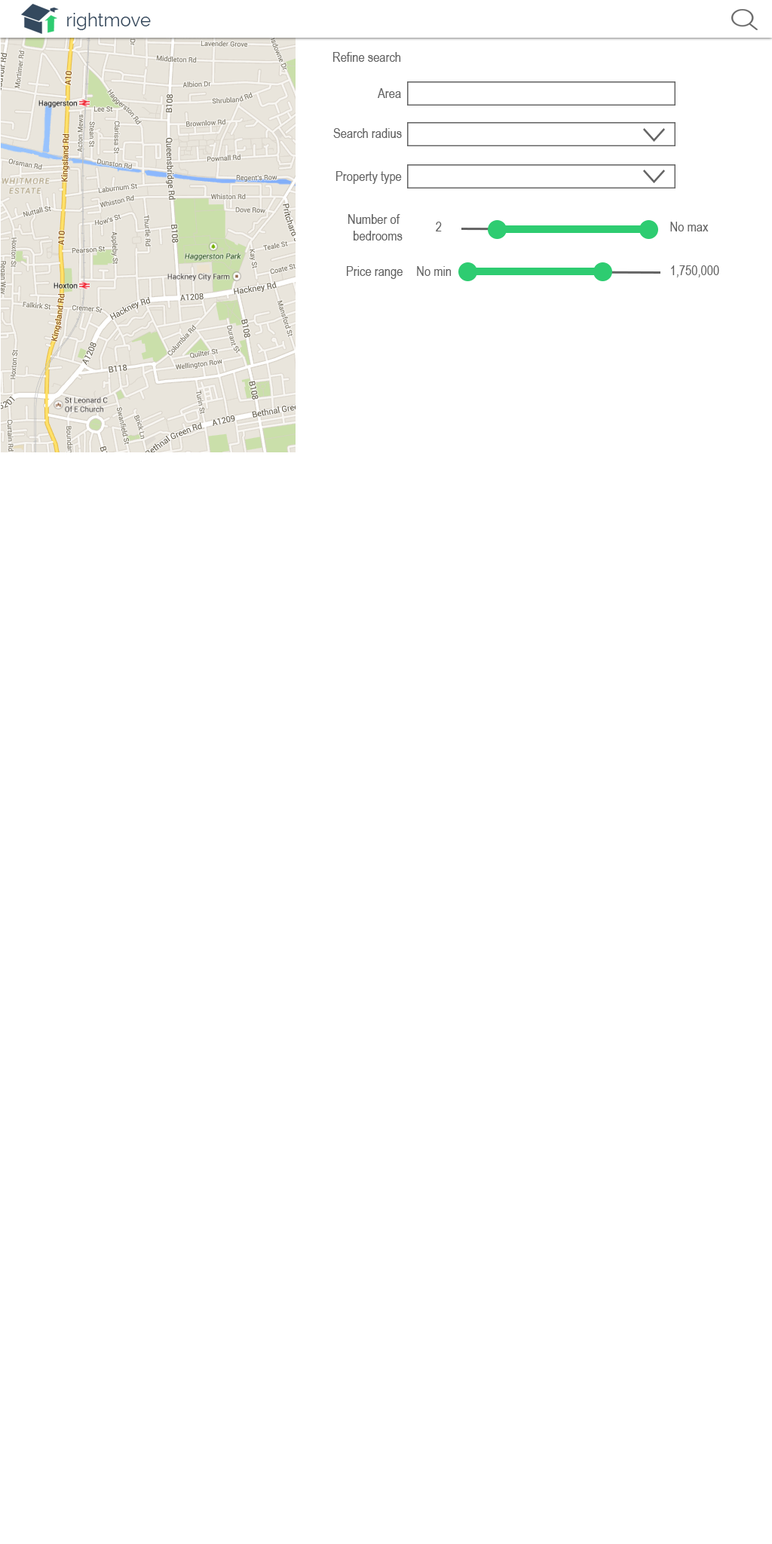
<style>
.page{position:relative;width:772px;height:1544px;background:#ffffff}
.page>*{position:absolute;margin:0}
.t1{font:18.1px "Raleway";color:#34495e}
.t2{font:13.6px "ArialNarrow";color:#646464}
</style>
<div class="page">
<p class="t1" style="left:67px;top:13px;width:84px;height:17px">rightmove</p>
<p class="t2" style="left:333px;top:52px;width:68px;height:10px">Refine search</p>
<p class="t2" style="left:378px;top:88px;width:23px;height:10px">Area</p>
<p class="t2" style="left:333px;top:128px;width:69px;height:10px">Search radius</p>
<p class="t2" style="left:336px;top:171px;width:66px;height:13px">Property type</p>
<p class="t2" style="left:348px;top:214px;width:55px;height:27px;text-align:right">Number of <br>bedrooms</p>
<p class="t2" style="left:436px;top:222px;width:6px;height:9px">2</p>
<p class="t2" style="left:670px;top:222px;width:39px;height:9px">No max</p>
<p class="t2" style="left:347px;top:266px;width:56px;height:13px">Price range</p>
<p class="t2" style="left:417px;top:266px;width:34px;height:10px">No min</p>
<p class="t2" style="left:671px;top:265px;width:48px;height:12px">1,750,000</p>
</div>
